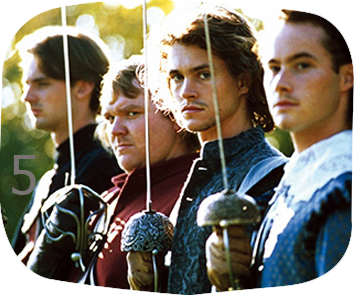
<style>
.page{position:relative;width:354px;height:295px}
.page>*{position:absolute;margin:0}
.t1{font:54px "Tahoma";color:#787270}
</style>
<div class="page">
<p class="t1" style="left:12px;top:155px;width:24px;height:40px">5</p>
</div>
